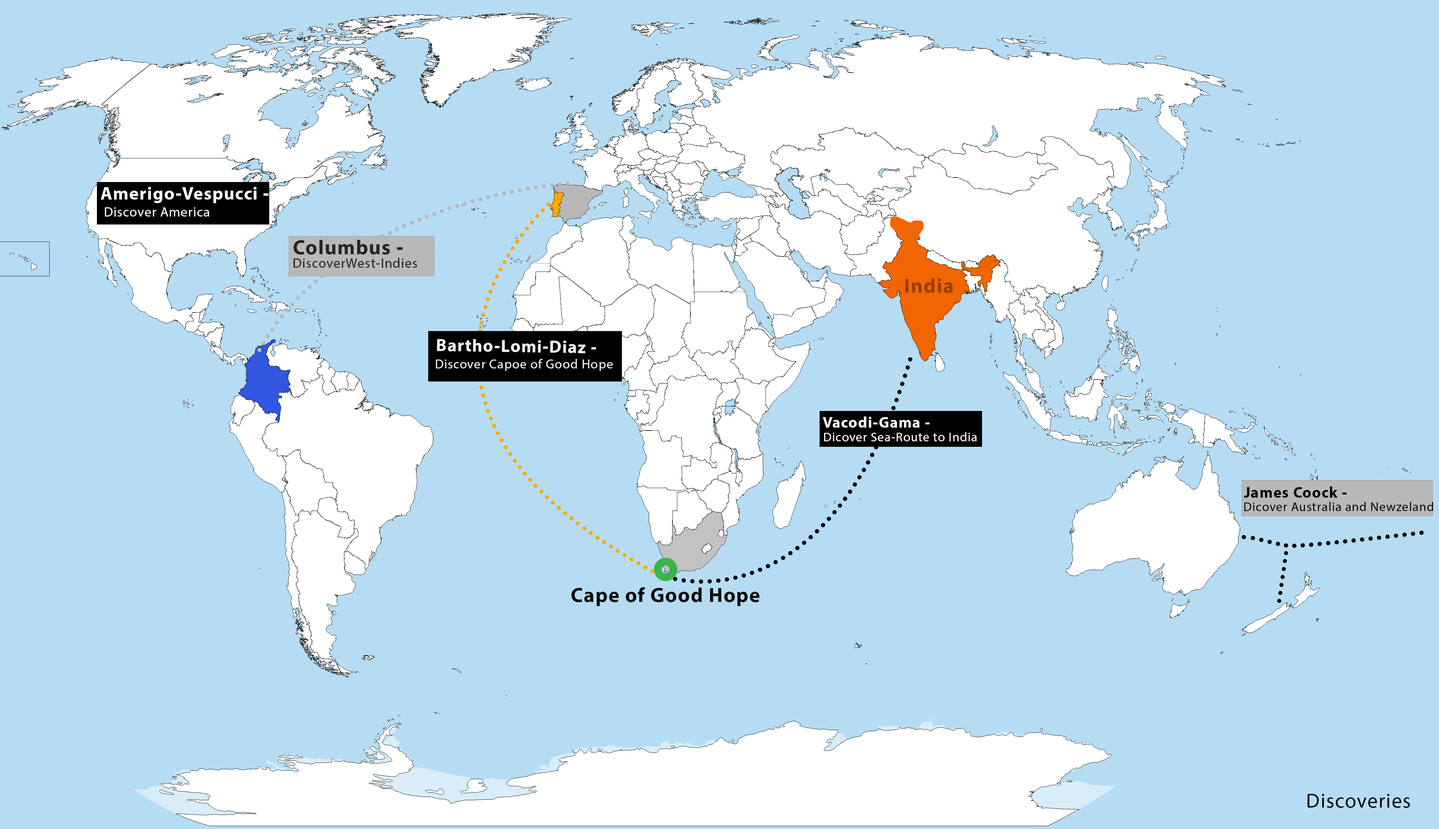
<style>
.page{position:relative;width:1439px;height:829px;background:#b6dcf4}
.page>*{position:absolute;margin:0}
.t1{font:18.1px "MyriadHebrew-Bold";letter-spacing:0.04em;color:#ffffff}
.t2{font:13.6px "MyriadHebrew-Regular";letter-spacing:0.04em;color:#ffffff}
.t3{font:20.5px "MyriadHebrew-Bold";letter-spacing:0.04em;color:#242424}
.t4{font:13.6px "MyriadHebrew-Regular";letter-spacing:0.04em;color:#242424}
.t5{font:20.5px "MyriadHebrew-Bold";letter-spacing:0.04em;color:#993f02}
.t6{font:17.5px "MyriadHebrew-Bold";letter-spacing:0.04em;color:#f4f4f4}
.t7{font:13.2px "MyriadHebrew-Regular";letter-spacing:0.04em;color:#f4f4f4}
.t8{font:15.3px "MyriadHebrew-Bold";letter-spacing:0.04em;color:#ffffff}
.t9{font:12.8px "MyriadHebrew-Regular";letter-spacing:0.04em;color:#ffffff}
.t10{font:15.3px "MyriadHebrew-Bold";letter-spacing:0.04em;color:#000000}
.t11{font:12.8px "MyriadHebrew-Regular";letter-spacing:0.04em;color:#040404}
.t12{font:20.5px "MyriadHebrew-Bold";letter-spacing:0.04em;color:#0d0d0d}
.t13{font:20.5px "MyriadHebrew-Regular";letter-spacing:0.04em;color:#040404}
</style>
<div class="page">
<p class="t1" style="left:101px;top:187px;width:168px;height:16px">Amerigo-Vespucci -</p>
<p class="t2" style="left:105px;top:207px;width:104px;height:9px">Discover America</p>
<p class="t3" style="left:294px;top:240px;width:109px;height:15px">Columbus -</p>
<p class="t4" style="left:294px;top:258px;width:123px;height:10px">DiscoverWest-Indies</p>
<p class="t5" style="left:905px;top:278px;width:48px;height:15px">India</p>
<p class="t6" style="left:437px;top:339px;width:159px;height:14px;rotate:1deg">Bartho-Lomi-Diaz -</p>
<p class="t7" style="left:436px;top:359px;width:177px;height:12px">Discover Capoe of Good Hope</p>
<p class="t8" style="left:823px;top:416px;width:106px;height:11px">Vacodi-Gama -</p>
<p class="t9" style="left:824px;top:432px;width:152px;height:9px">Dicover Sea-Route to India</p>
<p class="t10" style="left:1244px;top:486px;width:102px;height:12px">James Coock -</p>
<p class="t11" style="left:1244px;top:502px;width:189px;height:9px">Dicover Australia and Newzeland</p>
<p class="t12" style="left:571px;top:587px;width:188px;height:19px">Cape of Good Hope</p>
<p class="t13" style="left:1307px;top:794px;width:103px;height:14px">Discoveries</p>
</div>
